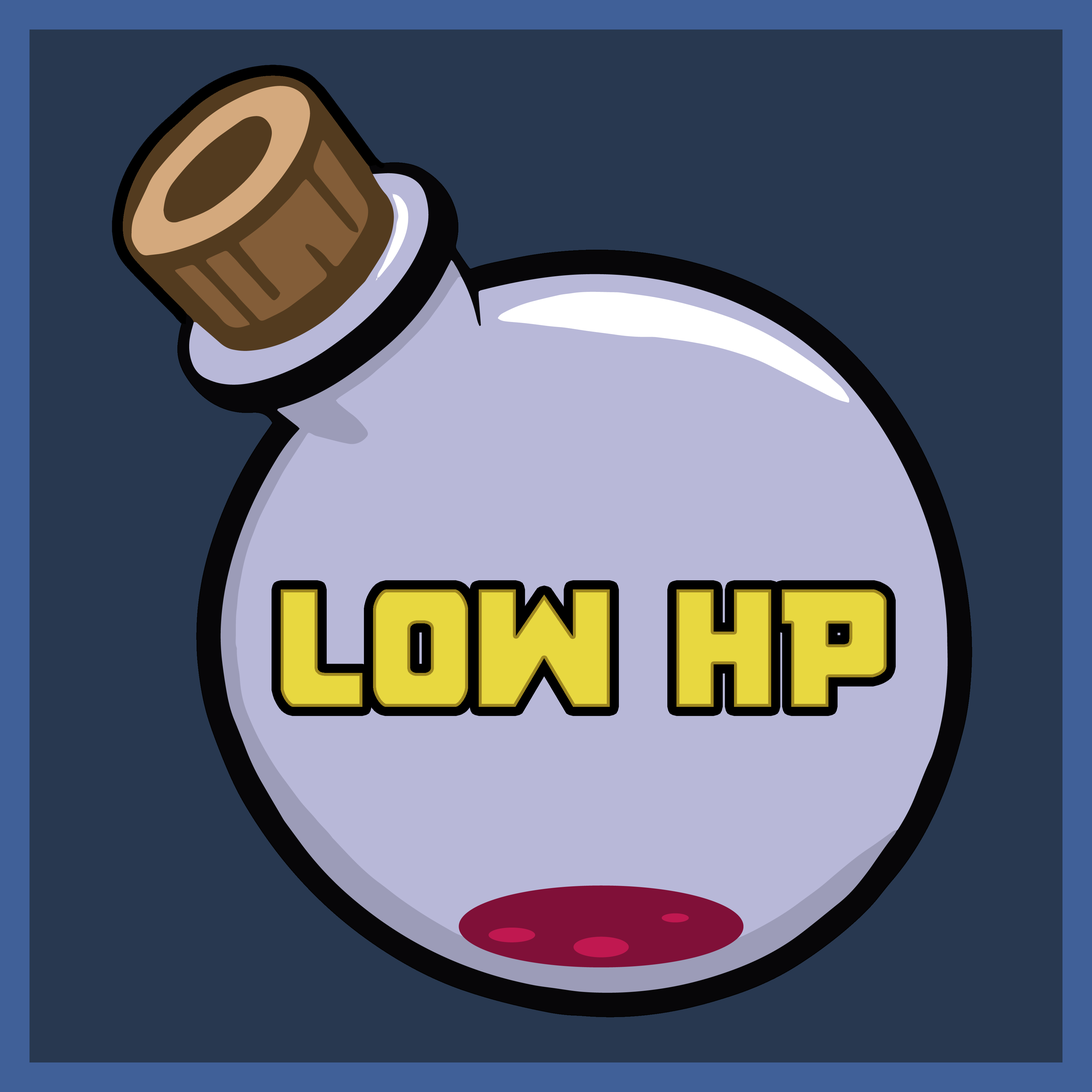
<style>
.page{position:relative;width:1092px;height:1092px;background:#283850}
.page>*{position:absolute;margin:0}
.t1{font:196.8px "Pistoleer";color:#e8d840}
</style>
<div class="page">
<p class="t1" style="left:281px;top:589px;width:606px;height:118px">LOW HP</p>
</div>
